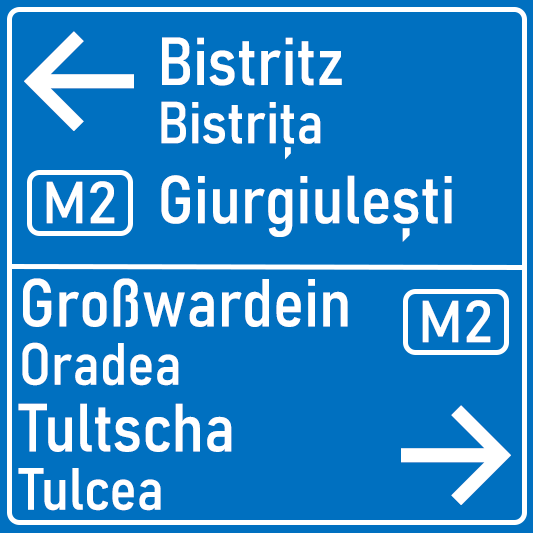
<style>
.page{position:relative;width:533px;height:533px;background:#0070c0}
.page>*{position:absolute;margin:0}
.t1{font:150px "Inter-Medium";color:#ffffff}
.t2{font:66.7px "Bahnschrift-SemiCondensed";color:#ffffff}
.t3{font:66.7px/58.3px "Bahnschrift-SemiCondensed";color:#ffffff}
.t4{font:58.3px/58.3px "Bahnschrift-SemiCondensed";color:#ffffff}
.t5{font:58.3px "Bahnschrift";color:#ffffff}
.t6{font:66.7px/66.7px "Bahnschrift-SemiCondensed";color:#ffffff}
</style>
<div class="page">
<p class="t1" style="left:24px;top:31px;width:110px;height:100px">←</p>
<p class="t2" style="left:161px;top:37px;width:291px;height:205px"><span class="t3">Bistritz<br></span><span class="t4">Bistrița<br></span>Giurgiulești</p>
<p class="t5" style="left:46px;top:181px;width:69px;height:43px">M2</p>
<p class="t6" style="left:18px;top:278px;width:330px;height:233px">Großwardein<br><span class="t4">Oradea<br></span>Tultscha<br><span class="t4">Tulcea</span></p>
<p class="t5" style="left:422px;top:300px;width:69px;height:43px">M2</p>
<p class="t1" style="left:401px;top:405px;width:110px;height:100px">→</p>
</div>
